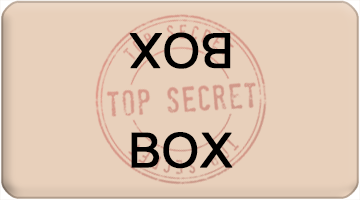
<style>
.page{position:relative;width:360px;height:200px;background:#e8d0bb}
.page>*{position:absolute;margin:0}
.t1{font:48px "ArialMT";color:#000000;font-weight:bold}
</style>
<div class="page">
<p class="t1" style="left:129px;top:32px;width:102px;height:37px;rotate:180deg">BOX</p>
<p class="t1" style="left:131px;top:132px;width:102px;height:37px">BOX</p>
</div>
